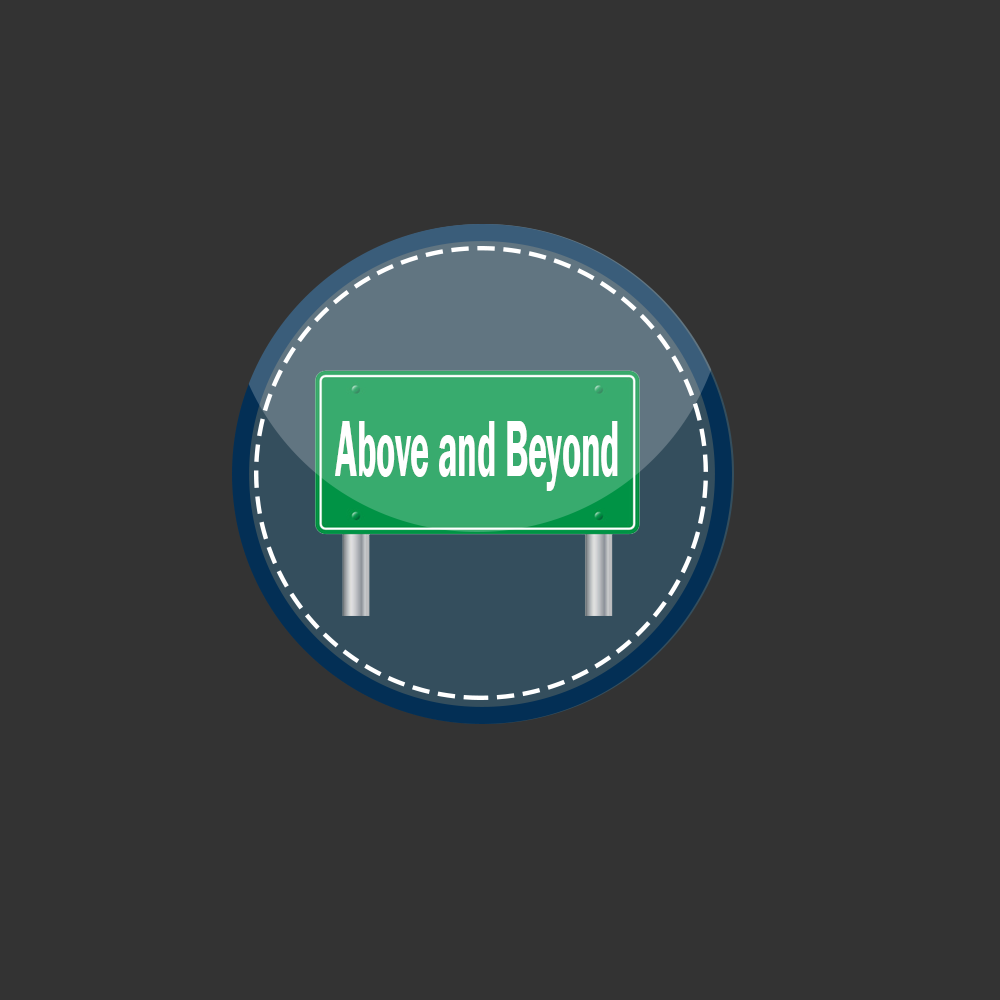
<style>
.page{position:relative;width:1000px;height:1000px;background:#333333}
.page>*{position:absolute;margin:0}
.t1{font:81.7px "FranklinGothic-Demi";color:#ffffff;scale:0.43 1}
</style>
<div class="page">
<p class="t1" style="left:335px;top:421px;width:283px;height:70px">Above and Beyond</p>
</div>
